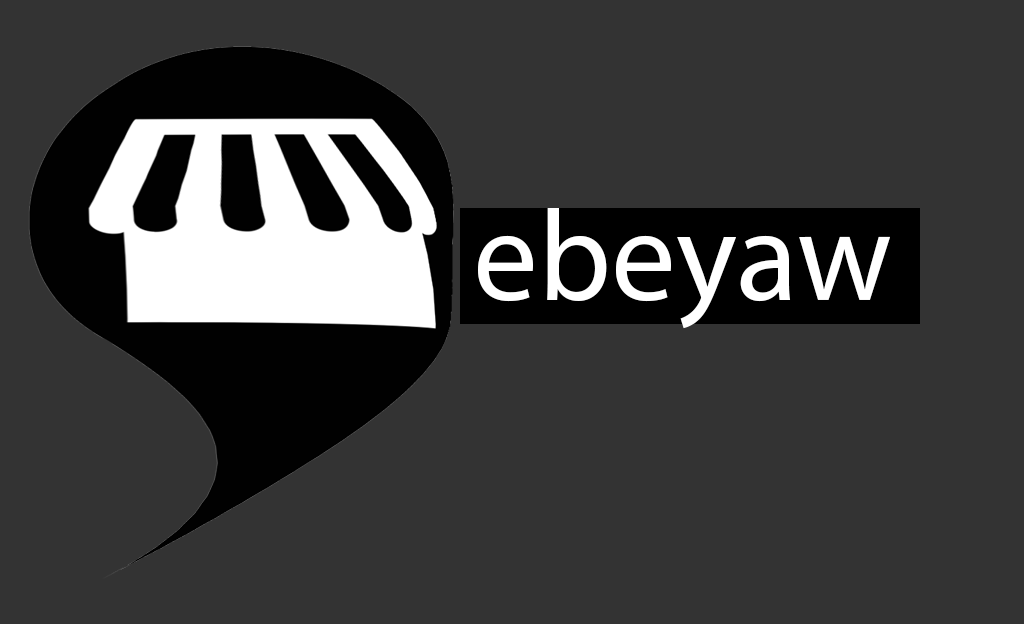
<style>
.page{position:relative;width:1024px;height:624px;background:#333333}
.page>*{position:absolute;margin:0}
.t1{font:129.2px "MyriadPro-Regular";color:#ffffff}
</style>
<div class="page">
<p class="t1" style="left:478px;top:208px;width:412px;height:121px">ebeyaw</p>
</div>
